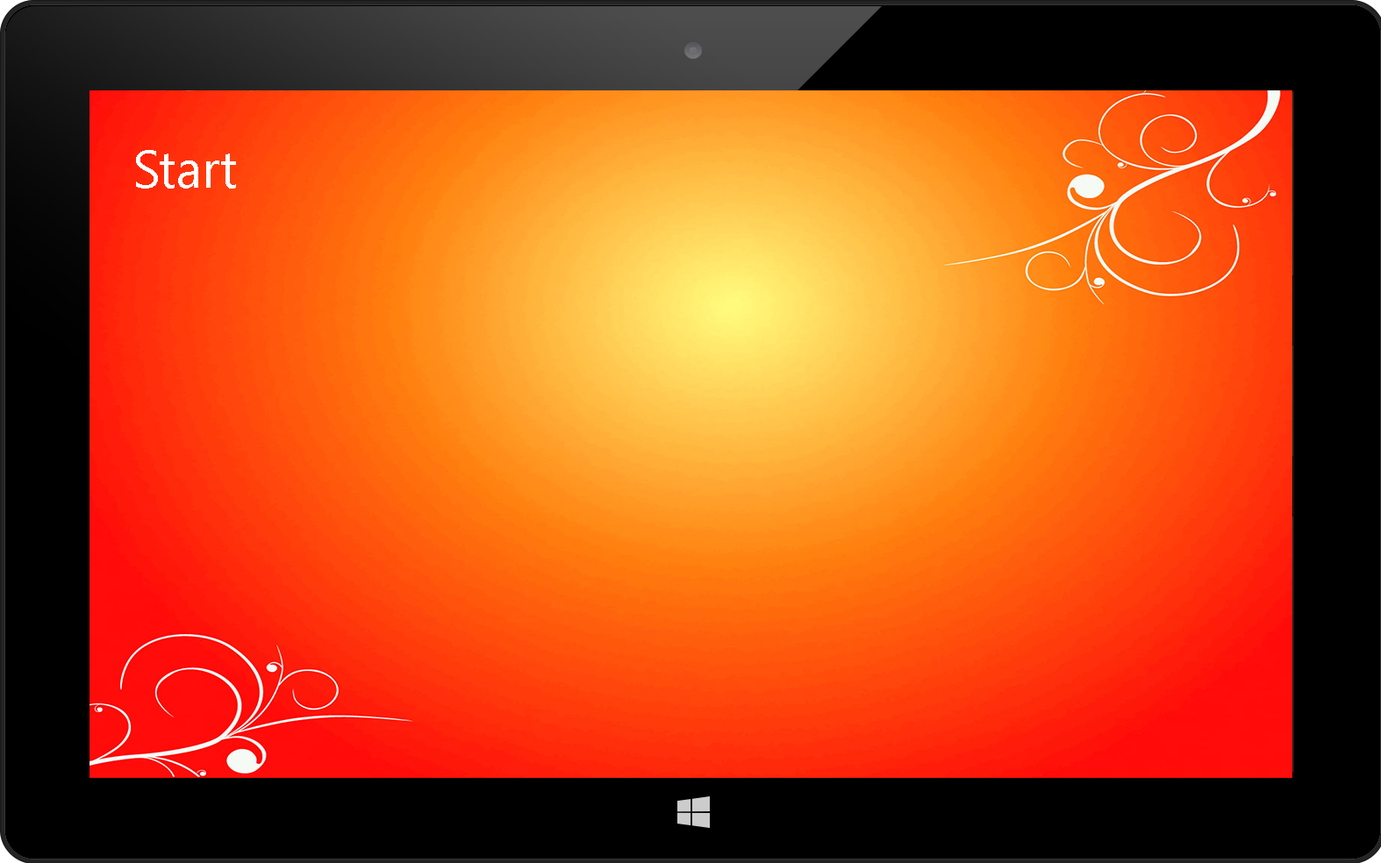
<style>
.page{position:relative;width:1381px;height:863px;background:#000000}
.page>*{position:absolute;margin:0}
.t1{font:52.7px "Leelawadee";color:#ffffff;scale:0.96 1}
</style>
<div class="page">
<p class="t1" style="left:136px;top:150px;width:100px;height:39px">Start</p>
</div>
